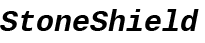
<style>
.page{position:relative;width:205px;height:43px;background:#ffffff}
.page>*{position:absolute;margin:0}
.t1{font:30px "LiberationMono-BoldItalic";color:#000000}
</style>
<div class="page">
<p class="t1" style="left:0px;top:9px;width:199px;height:22px">StoneShield</p>
</div>
